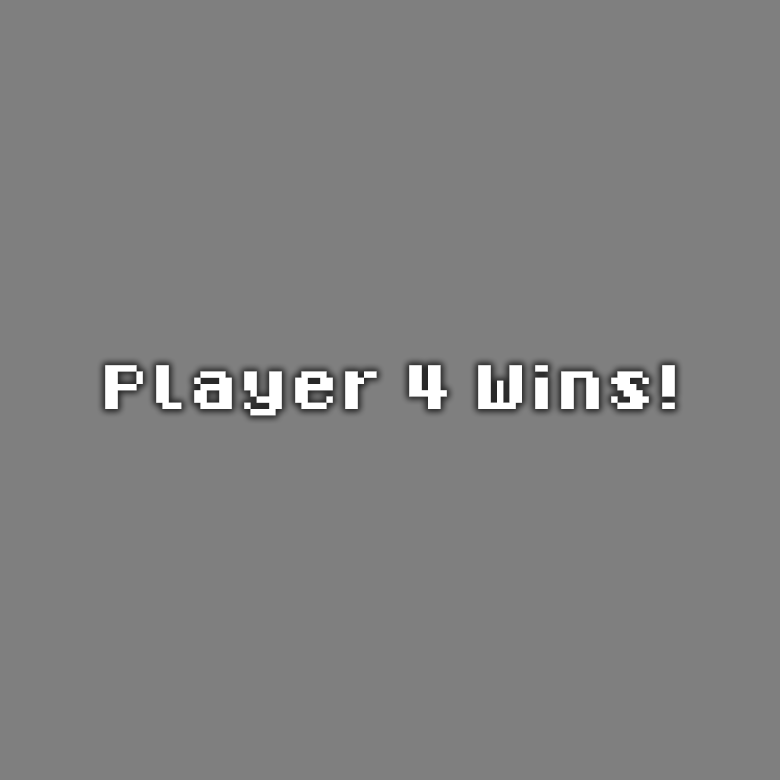
<style>
.page{position:relative;width:780px;height:780px;background:#7f7f7f}
.page>*{position:absolute;margin:0}
.t1{font:100px "8-Bit-Madness";letter-spacing:0.005em;color:#ffffff}
</style>
<div class="page">
<p class="t1" style="left:105px;top:365px;width:570px;height:51px">Player 4 Wins!</p>
</div>
